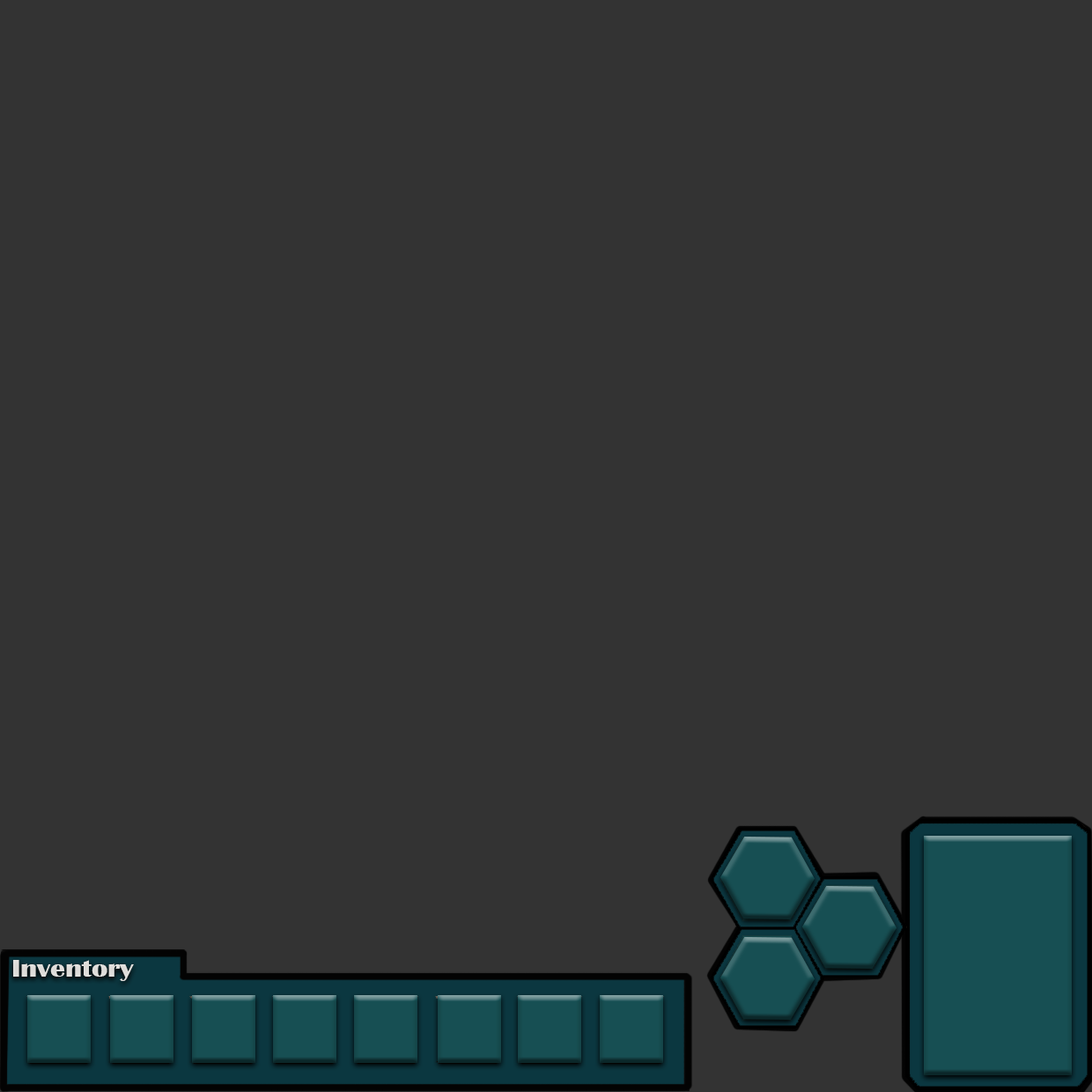
<style>
.page{position:relative;width:1092px;height:1092px;background:#333333}
.page>*{position:absolute;margin:0}
.t1{font:24.7px "BritannicBold";color:#d3d1cd;scale:1.2 1}
</style>
<div class="page">
<p class="t1" style="left:13px;top:960px;width:121px;height:21px">Inventory</p>
</div>
